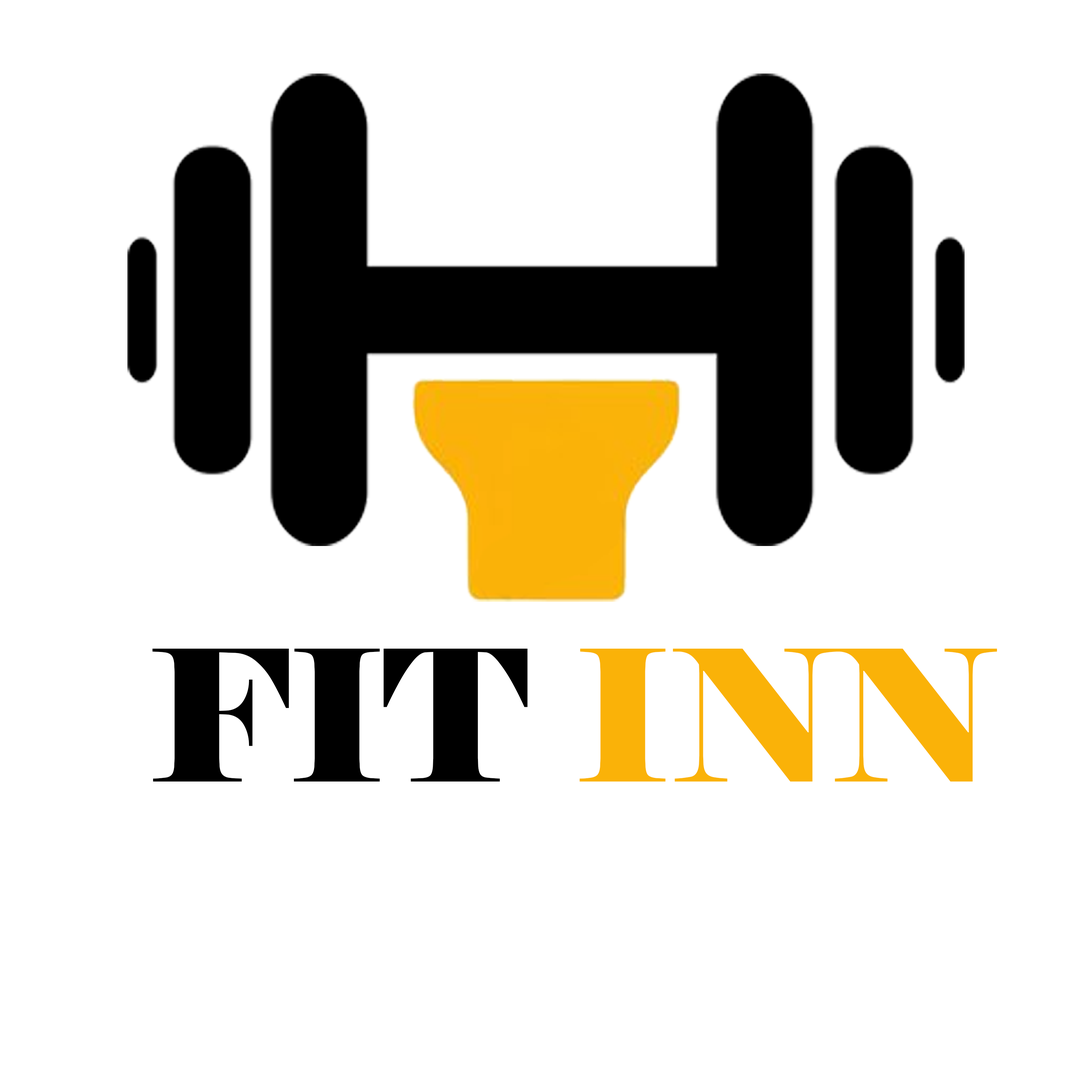
<style>
.page{position:relative;width:1092px;height:1092px;background:#ffffff}
.page>*{position:absolute;margin:0}
.t1{font:182px "Elephant-Regular";color:#000000}
.t2{font:182px "Elephant-Regular";color:#fab208}
</style>
<div class="page">
<p class="t1" style="left:152px;top:649px;width:845px;height:132px">FIT<span class="t2"> INN</span></p>
</div>
